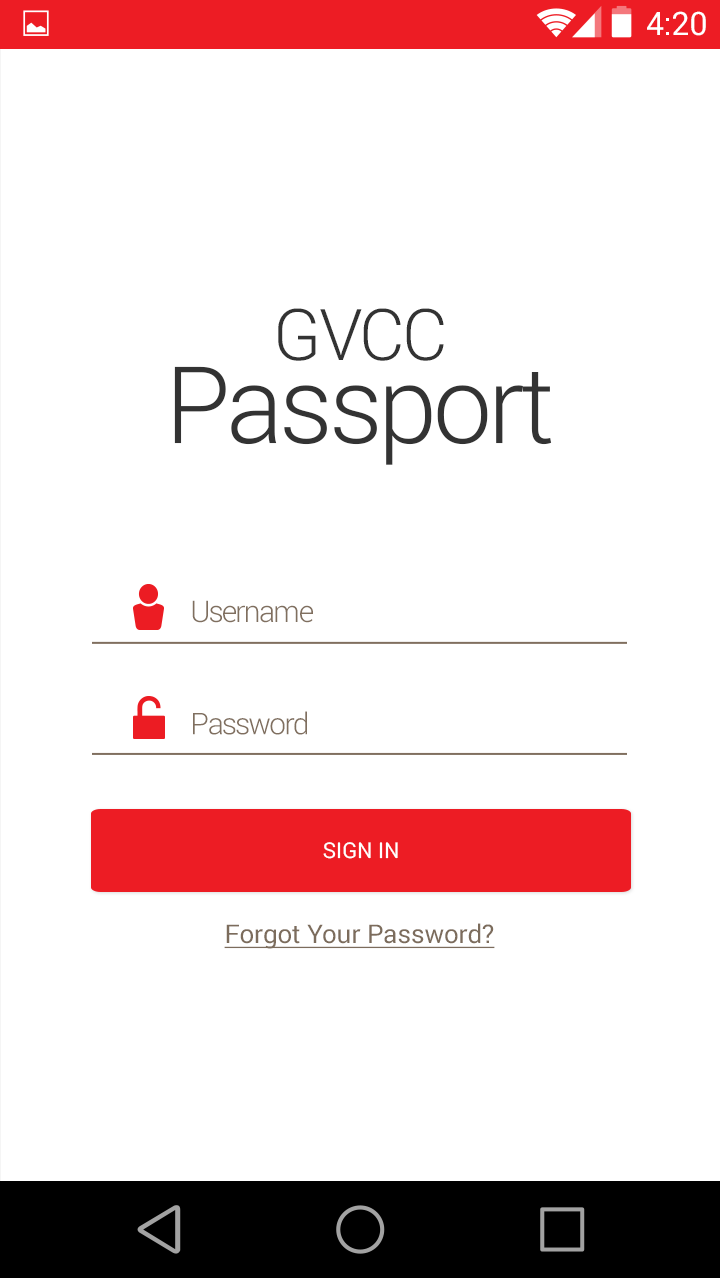
<style>
.page{position:relative;width:720px;height:1278px;background:#ffffff}
.page>*{position:absolute;margin:0}
.t1{font:32.2px "Roboto-Regular";color:#ffffff}
.t2{font:107.4px/82.8px "Roboto-Light";letter-spacing:-0.04em;color:#333333}
.t3{font:71.4px/82.8px "Roboto-Light";letter-spacing:-0.04em;color:#333333}
.t4{font:30px "Roboto-Light";letter-spacing:-0.04em;color:#806f5f}
.t5{font:21.8px "Roboto-Regular";color:#ffffff;text-transform:uppercase}
.t6{font:25.8px "Roboto-Regular";color:#7c6c5c;text-decoration:underline}
</style>
<div class="page">
<p class="t1" style="left:647px;top:11px;width:59px;height:25px">4:20</p>
<p class="t2" style="left:174px;top:308px;width:378px;height:157px;text-align:center"><span class="t3">GVCC<br></span>Passport</p>
<p class="t4" style="left:192px;top:600px;width:121px;height:23px">Username</p>
<p class="t4" style="left:193px;top:711px;width:114px;height:24px">Password</p>
<p class="t5" style="left:323px;top:842px;width:75px;height:17px">Sign In</p>
<p class="t6" style="left:224px;top:923px;width:271px;height:26px">Forgot Your Password?</p>
</div>
